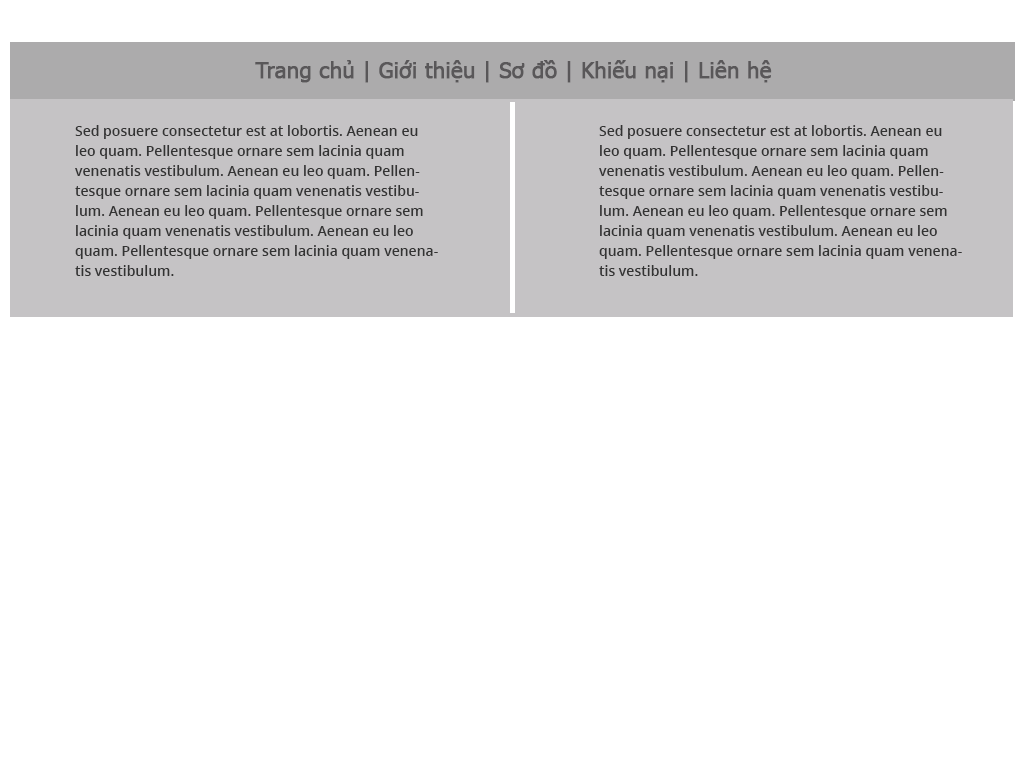
<style>
.page{position:relative;width:1024px;height:768px;background:#ffffff}
.page>*{position:absolute;margin:0}
.t1{font:21.7px "Tahoma";color:#595759;font-weight:bold}
.t2{font:14px/20px "OpenSans-Semibold";color:#333333}
</style>
<div class="page">
<p class="t1" style="left:255px;top:60px;width:517px;height:23px">Trang chủ | Giới thiệu | Sơ đồ | Khiếu nại | Liên hệ</p>
<p class="t2" style="left:75px;top:125px;width:363px;height:151px">Sed posuere consectetur est at lobortis. Aenean eu leo quam. Pellentesque ornare sem lacinia quam venenatis vestibulum. Aenean eu leo quam. Pellentesque ornare sem lacinia quam venenatis vestibulum. Aenean eu leo quam. Pellentesque ornare sem lacinia quam venenatis vestibulum. Aenean eu leo quam. Pellentesque ornare sem lacinia quam venenatis vestibulum.</p>
<p class="t2" style="left:599px;top:125px;width:363px;height:151px">Sed posuere consectetur est at lobortis. Aenean eu leo quam. Pellentesque ornare sem lacinia quam venenatis vestibulum. Aenean eu leo quam. Pellentesque ornare sem lacinia quam venenatis vestibulum. Aenean eu leo quam. Pellentesque ornare sem lacinia quam venenatis vestibulum. Aenean eu leo quam. Pellentesque ornare sem lacinia quam venenatis vestibulum.</p>
</div>
